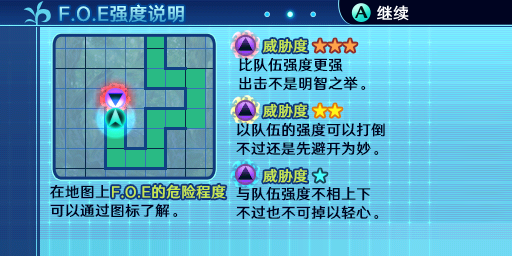
<style>
.page{position:relative;width:512px;height:256px}
.page>*{position:absolute;margin:0}
.t1{font:18.7px "HYWenHei-FEW";letter-spacing:0.025em}
.t2{font:14.7px "HYWenHei-FEW";letter-spacing:0.025em;color:#c6e752}
.t3{font:14.7px/18.7px "HYWenHei-FEW";letter-spacing:0.025em;color:#000421}
.t4{font:14.7px/18.7px "HYWenHei-FEW";letter-spacing:0.025em}
</style>
<div class="page">
<p class="t1" style="left:59px;top:4px;width:125px;height:19px">F.O.E强度说明</p>
<p class="t2" style="left:263px;top:38px;width:45px;height:15px">威胁度</p>
<p class="t3" style="left:239px;top:57px;width:127px;height:34px">比队伍强度更强<br>出击不是明智之举。</p>
<p class="t2" style="left:263px;top:103px;width:45px;height:15px">威胁度</p>
<p class="t3" style="left:236px;top:122px;width:149px;height:34px">以队伍的强度可以打倒<br>不过还是先避开为妙。</p>
<p class="t2" style="left:263px;top:168px;width:45px;height:15px">威胁度</p>
<p class="t4" style="left:50px;top:184px;width:175px;height:34px">在地图上F.O.E的危险程度<br>可以通过图标了解。</p>
<p class="t2" style="left:112px;top:184px;width:114px;height:15px">F.O.E的危险程度</p>
<p class="t3" style="left:236px;top:186px;width:143px;height:34px">与队伍强度不相上下<br>不过也不可掉以轻心。</p>
</div>
